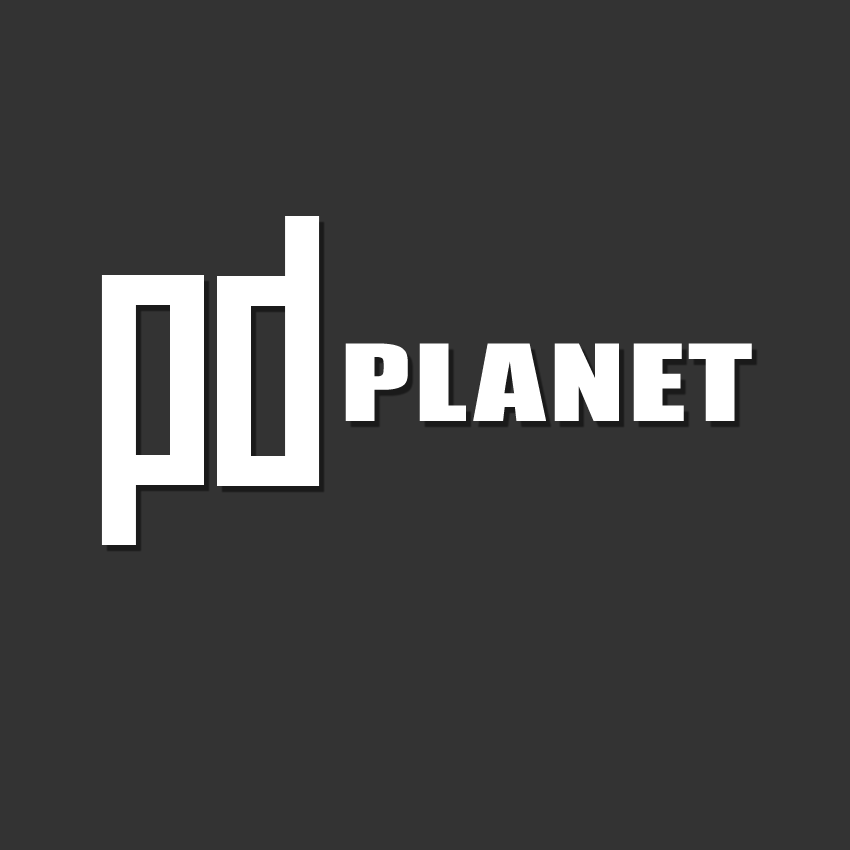
<style>
.page{position:relative;width:850px;height:850px;background:#333333}
.page>*{position:absolute;margin:0}
.t1{font:299.7px "Elevator";color:#ffffff;scale:1.13 1}
.t2{font:97.9px "Impact";letter-spacing:0.025em;color:#ffffff;scale:1.43 1}
</style>
<div class="page">
<p class="t1" style="left:217px;top:216px;width:103px;height:270px;rotate:180deg">P</p>
<p class="t2" style="left:345px;top:343px;width:407px;height:78px">PLANET</p>
</div>
